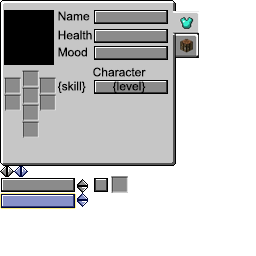
<style>
.page{position:relative;width:256px;height:256px;background:#ffffff}
.page>*{position:absolute;margin:0}
.t1{font:12px "ArialMT";color:#000000}
</style>
<div class="page">
<p class="t1" style="left:58px;top:11px;width:32px;height:10px">Name</p>
<p class="t1" style="left:58px;top:30px;width:34px;height:10px">Health</p>
<p class="t1" style="left:58px;top:47px;width:29px;height:10px">Mood</p>
<p class="t1" style="left:93px;top:67px;width:53px;height:10px">Character</p>
<p class="t1" style="left:58px;top:81px;width:28px;height:12px">{skill}</p>
<p class="t1" style="left:113px;top:81px;width:33px;height:12px">{level}</p>
</div>
